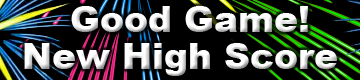
<style>
.page{position:relative;width:360px;height:80px;background:#000000}
.page>*{position:absolute;margin:0}
.t1{font:36px "Arial-Black";color:#ffffff}
</style>
<div class="page">
<p class="t1" style="left:71px;top:6px;width:237px;height:26px">Good Game!</p>
<p class="t1" style="left:24px;top:43px;width:313px;height:33px">New High Score</p>
</div>
